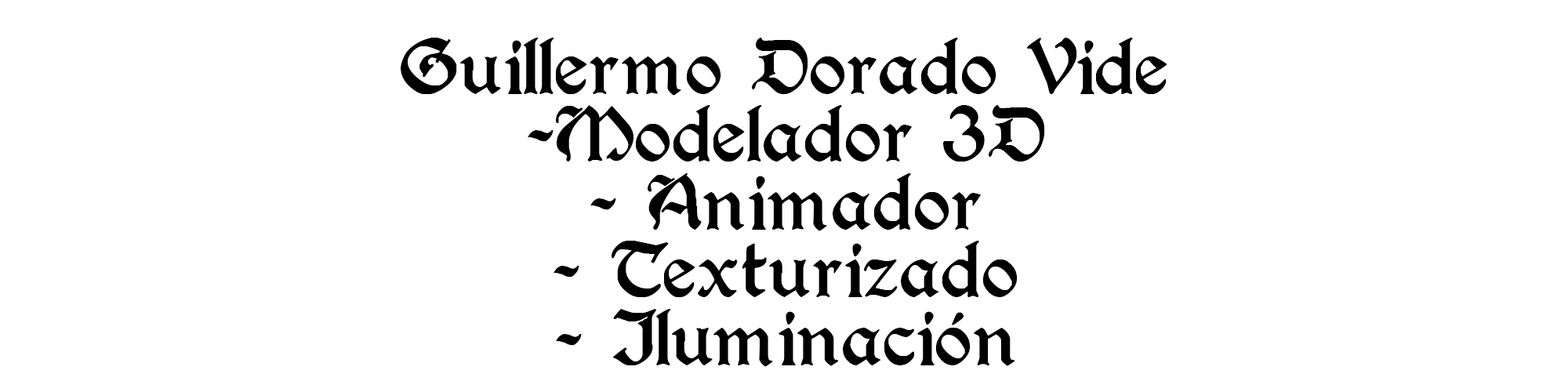
<style>
.page{position:relative;width:1568px;height:392px;background:#ffffff}
.page>*{position:absolute;margin:0}
.t1{font:56.4px "BerryRotunda-Regular";color:#000000}
</style>
<div class="page">
<p class="t1" style="left:401px;top:38px;width:766px;height:329px;text-align:center">Guillermo Dorado Vide<br>-Modelador 3D<br>- Animador<br>- Texturizado<br>- Iluminación</p>
</div>
